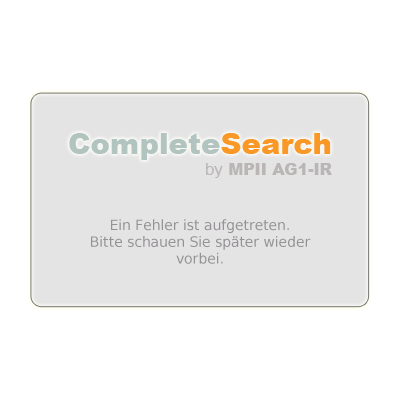
<style>
.page{position:relative;width:400px;height:400px;background:#ffffff}
.page>*{position:absolute;margin:0}
.t1{font:14px "BitstreamVeraSans-Roman";color:#949294}
</style>
<div class="page">
<p class="t1" style="left:91px;top:219px;width:220px;height:45px;text-align:center">Ein Fehler ist aufgetreten.<br>Bitte schauen Sie später wieder vorbei.</p>
</div>
